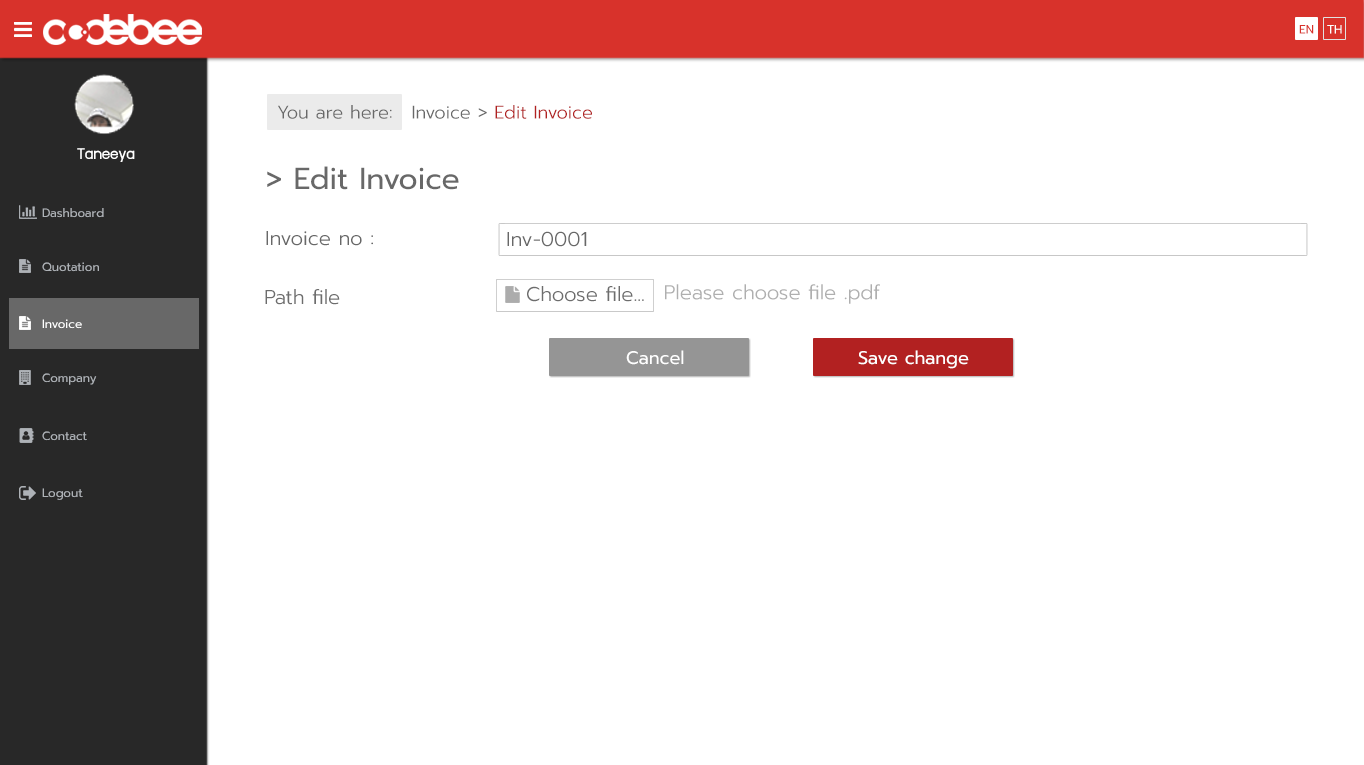
<style>
.page{position:relative;width:1364px;height:765px;background:#ffffff}
.page>*{position:absolute;margin:0}
.t1{font:12px "Prompt-Regular";color:#d8322b}
.t2{font:12px "Prompt-Regular";color:#ffffff}
.t3{font:18px "Prompt-Light";color:#686868}
.t4{font:18px "Prompt-Light";color:#b22121}
.t5{font:18px "supermarket";color:#ffffff}
.t6{font:30px "Prompt-Regular";color:#686868}
.t7{font:12px "Prompt-Regular";color:#aeb2b7}
.t8{font:20px "Prompt-Light";color:#686868}
.t9{font:20px "Prompt-Light";color:#acacac}
.t10{font:18px "Prompt-Regular";color:#ffffff}
</style>
<div class="page">
<p class="t1" style="left:1299px;top:25px;width:15px;height:9px">EN</p>
<p class="t2" style="left:1327px;top:25px;width:15px;height:9px">TH</p>
<p class="t3" style="left:278px;top:105px;width:114px;height:14px">You are here:</p>
<p class="t4" style="left:412px;top:105px;width:180px;height:14px"><span class="t3">Invoice &gt; </span>Edit Invoice</p>
<p class="t5" style="left:77px;top:148px;width:58px;height:14px">Taneeya</p>
<p class="t6" style="left:267px;top:166px;width:192px;height:24px">&gt; Edit Invoice</p>
<p class="t7" style="left:42px;top:208px;width:62px;height:10px">Dashboard</p>
<p class="t8" style="left:266px;top:231px;width:107px;height:15px">Invoice no :</p>
<p class="t8" style="left:507px;top:231px;width:80px;height:16px">Inv-0001</p>
<p class="t7" style="left:42px;top:262px;width:57px;height:10px">Quotation</p>
<p class="t8" style="left:265px;top:289px;width:75px;height:16px">Path file</p>
<p class="t8" style="left:527px;top:286px;width:117px;height:16px">Choose file...</p>
<p class="t9" style="left:665px;top:284px;width:215px;height:20px">Please choose file .pdf</p>
<p class="t2" style="left:42px;top:319px;width:40px;height:10px">Invoice</p>
<p class="t10" style="left:626px;top:350px;width:58px;height:15px">Cancel</p>
<p class="t10" style="left:858px;top:350px;width:111px;height:19px">Save change</p>
<p class="t7" style="left:42px;top:373px;width:55px;height:12px">Company</p>
<p class="t7" style="left:42px;top:431px;width:45px;height:10px">Contact</p>
<p class="t7" style="left:42px;top:488px;width:41px;height:12px">Logout</p>
</div>
